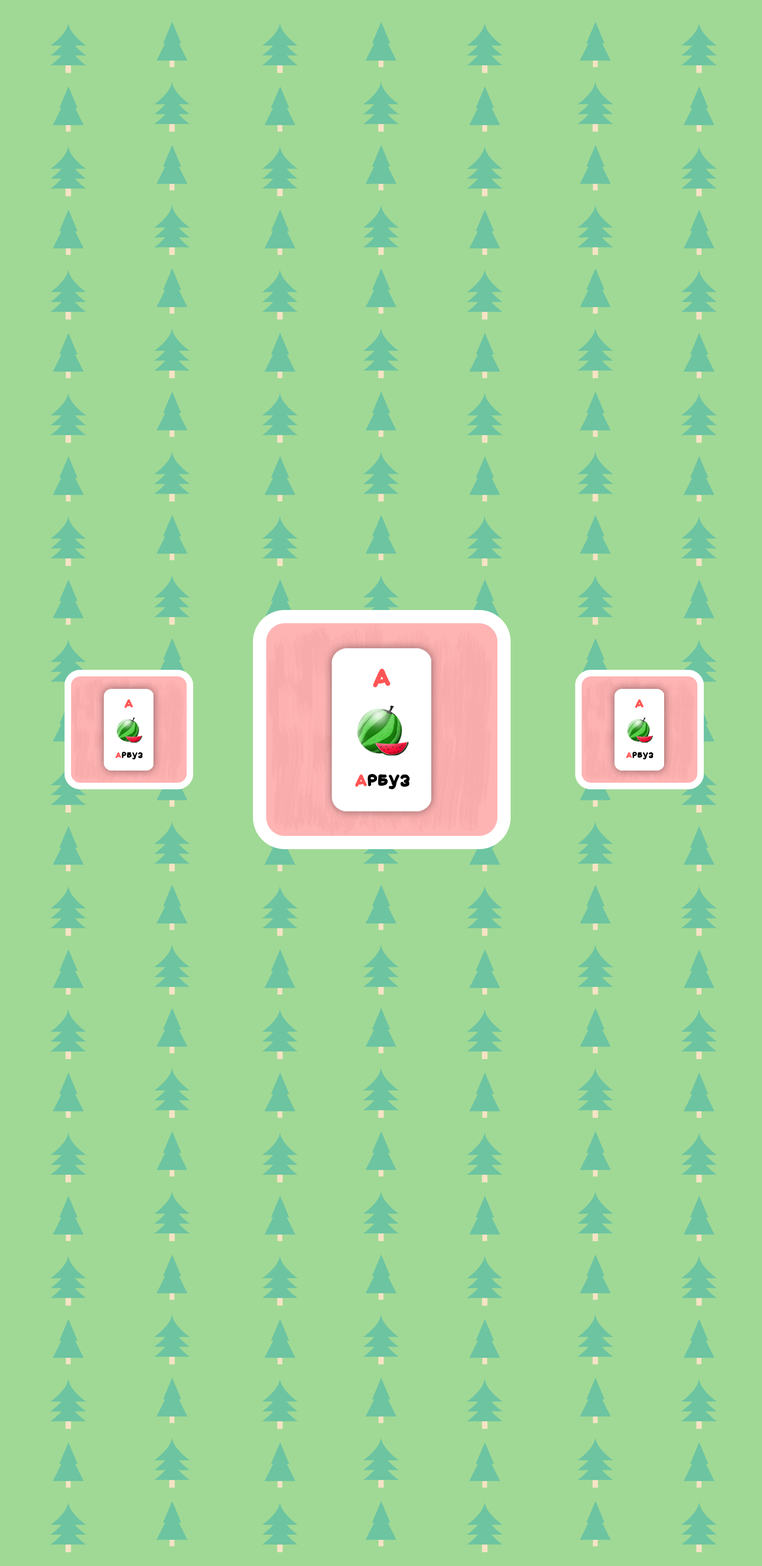
<style>
.page{position:relative;width:762px;height:1566px;background:#a0d995}
.page>*{position:absolute;margin:0}
.t1{font:19.6px "ToJapan";color:#ff5555}
.t2{font:9.8px "ToJapan";color:#ff5555}
.t3{font:6.5px "ToJapan";color:#000000}
.t4{font:6.5px "ToJapan";color:#ff5555}
.t5{font:13px "ToJapan";color:#000000}
.t6{font:13px "ToJapan";color:#ff5555}
</style>
<div class="page">
<p class="t1" style="left:373px;top:669px;width:17px;height:18px">А</p>
<p class="t2" style="left:124px;top:699px;width:9px;height:9px">А</p>
<p class="t2" style="left:635px;top:699px;width:8px;height:9px">А</p>
<p class="t3" style="left:115px;top:752px;width:28px;height:8px"><span class="t4">А</span>рбуз</p>
<p class="t3" style="left:626px;top:752px;width:27px;height:8px"><span class="t4">А</span>рбуз</p>
<p class="t5" style="left:355px;top:774px;width:55px;height:15px"><span class="t6">А</span>рбуз</p>
</div>
